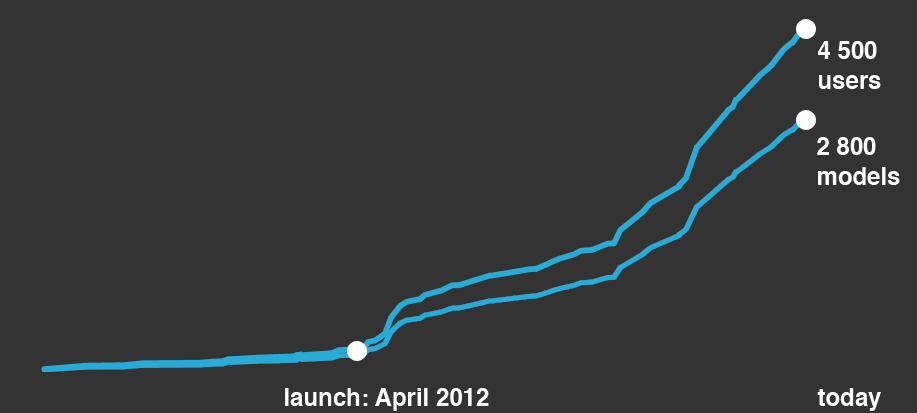
<style>
.page{position:relative;width:917px;height:413px;background:#333333}
.page>*{position:absolute;margin:0}
.t1{font:24px/30px "Helvetica-Bold";color:#ffffff}
.t2{font:24px "Helvetica-Bold";color:#ffffff}
</style>
<div class="page">
<p class="t1" style="left:818px;top:41px;width:63px;height:48px">4 500<br>users</p>
<p class="t1" style="left:817px;top:137px;width:83px;height:48px">2 800<br>models</p>
<p class="t2" style="left:285px;top:388px;width:204px;height:23px">launch: April 2012</p>
<p class="t2" style="left:817px;top:388px;width:64px;height:23px">today</p>
</div>
